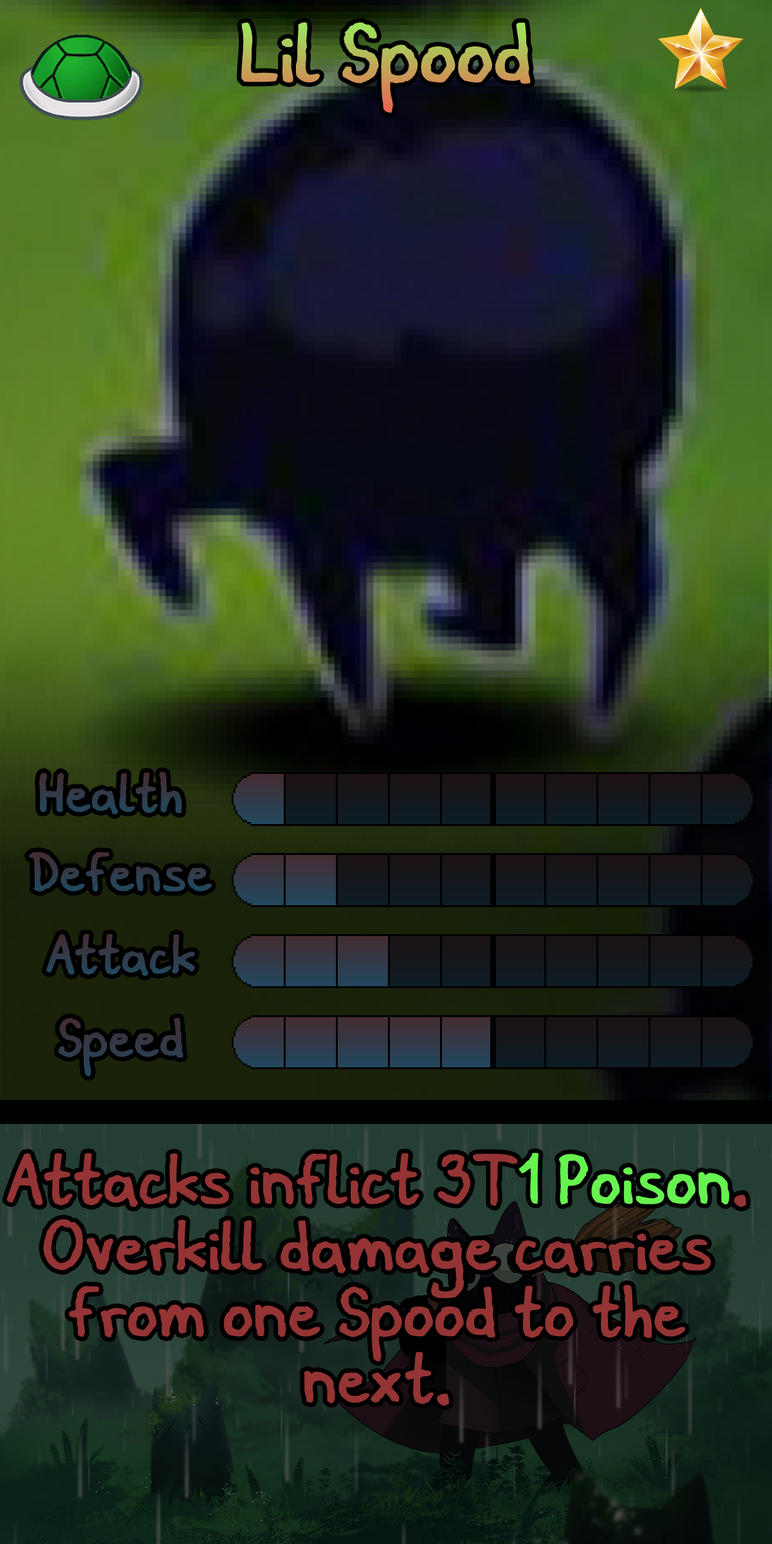
<style>
.page{position:relative;width:772px;height:1544px}
.page>*{position:absolute;margin:0}
.t1{font:143.5px "Domigorgon"}
.t2{font:92.7px "Domigorgon";color:#303c4b}
.t3{font:92.7px "Domigorgon";color:#2f3d4c}
.t4{font:92.7px "Domigorgon";color:#2f3c4b}
.t5{font:92.7px "Domigorgon";color:#353845}
.t6{font:119px/66.3px "Domigorgon";color:#943434}
.t7{font:119px/66.3px "Domigorgon";color:#66f24f}
</style>
<div class="page">
<p class="t1" style="left:241px;top:22px;width:290px;height:91px">Lil Spood</p>
<p class="t2" style="left:39px;top:772px;width:143px;height:43px">Health</p>
<p class="t3" style="left:29px;top:852px;width:183px;height:40px">Defense</p>
<p class="t4" style="left:46px;top:934px;width:150px;height:42px">Attack</p>
<p class="t5" style="left:59px;top:1018px;width:124px;height:59px">Speed</p>
<p class="t6" style="left:6px;top:1153px;width:740px;height:253px;text-align:center">Attacks inflict 3T<span class="t7">1 Poison</span>.<br>Overkill damage carries from one Spood to the next.</p>
</div>
